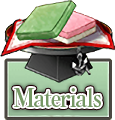
<style>
.page{position:relative;width:115px;height:120px;background:#ffffff}
.page>*{position:absolute;margin:0}
.t1{font:25px "RyuminPro-ExBold";letter-spacing:-0.08em;color:#759763;scale:0.9 1}
</style>
<div class="page">
<p class="t1" style="left:14px;top:88px;width:87px;height:20px">Materials</p>
</div>
